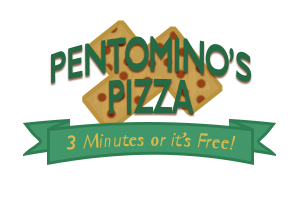
<style>
.page{position:relative;width:300px;height:200px;background:#ffffff}
.page>*{position:absolute;margin:0}
.t1{font:40.6px "GillSansMT-Bold";letter-spacing:-0.02em;color:#266a45;scale:0.69 1}
.t2{font:20px "GillSans-Italic";color:#d8bb49}
</style>
<div class="page">
<p class="t1" style="left:51px;top:36px;width:201px;height:79px;text-align:center">PENTOMINO’S<br>PIZZA</p>
<p class="t2" style="left:66px;top:132px;width:170px;height:18px">3 Minutes or it’s Free!</p>
</div>
